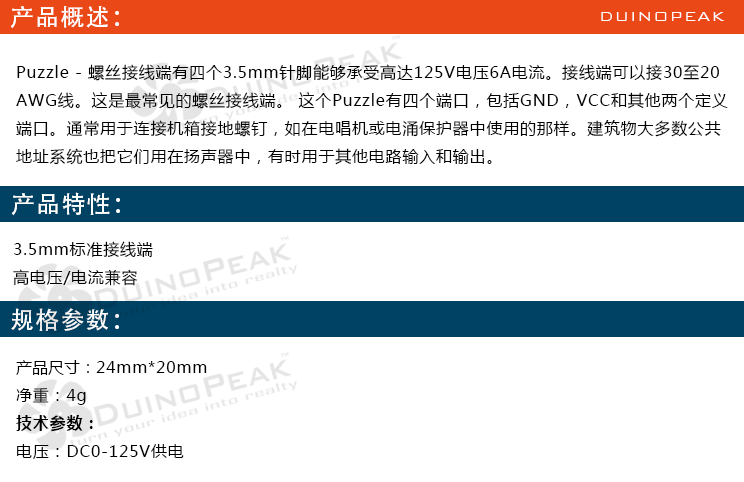
<style>
.page{position:relative;width:744px;height:482px;background:#ffffff}
.page>*{position:absolute;margin:0}
.t1{font:24px "AdobeHeitiStd-Regular";letter-spacing:0.05em;color:#ffffff}
.t2{font:18px "BankGothicBT-Light";letter-spacing:0.05em;color:#ffffff}
.t3{font:16px "MicrosoftYaHei";letter-spacing:0.05em;color:#000000}
.t4{font:16px "MicrosoftYaHei";color:#000000}
.t5{font:16px "MicrosoftYaHei-Bold";letter-spacing:0.05em;color:#000000}
</style>
<div class="page">
<p class="t1" style="left:10px;top:6px;width:109px;height:23px">产品概述：</p>
<p class="t2" style="left:601px;top:12px;width:124px;height:9px">DUINOPEAK</p>
<p class="t3" style="left:16px;top:64px;width:712px;height:101px">Puzzle - 螺丝接线端有四个3.5mm针脚能够承受高达125V电压6A电流。接线端可以接30至20<br>AWG线。这是最常见的螺丝接线端。 这个Puzzle有四个端口，包括GND，VCC和其他两个定义<br>端口。通常用于连接机箱接地螺钉，如在电唱机或电涌保护器中使用的那样。建筑物大多数公共<br>地址系统也把它们用在扬声器中，有时用于其他电路输入和输出。</p>
<p class="t1" style="left:11px;top:192px;width:109px;height:24px">产品特性：</p>
<p class="t3" style="left:13px;top:241px;width:140px;height:45px">3.5mm标准接线端<br>高电压/电流兼容</p>
<p class="t1" style="left:11px;top:308px;width:108px;height:23px">规格参数：</p>
<p class="t3" style="left:16px;top:360px;width:191px;height:99px"><span class="t4">产品尺寸：</span>24mm*20mm<br>净重：4g<br><span class="t5">技术参数：<br></span>电压：DC0-125V供电</p>
</div>
